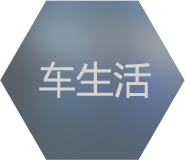
<style>
.page{position:relative;width:185px;height:160px;background:#ffffff}
.page>*{position:absolute;margin:0}
.t1{font:37.5px "MicrosoftYaHei";color:#d4d3d3}
</style>
<div class="page">
<p class="t1" style="left:39px;top:61px;width:112px;height:37px">车生活</p>
</div>
